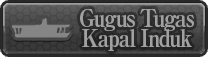
<style>
.page{position:relative;width:208px;height:57px}
.page>*{position:absolute;margin:0}
.t1{font:24px/20px "RyuminPro-ExBold";letter-spacing:-0.08em;color:#a1a1a1;scale:0.9 1}
</style>
<div class="page">
<p class="t1" style="left:80px;top:9px;width:114px;height:42px;text-align:center">Gugus Tugas<br>Kapal Induk</p>
</div>
